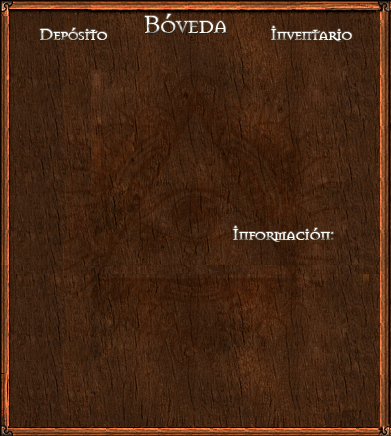
<style>
.page{position:relative;width:391px;height:436px}
.page>*{position:absolute;margin:0}
.t1{font:26.5px "Mason-Regular";letter-spacing:-0.06em}
.t2{font:18px "Mason-Regular";letter-spacing:-0.06em}
</style>
<div class="page">
<p class="t1" style="left:145px;top:14px;width:83px;height:19px">Bóveda</p>
<p class="t2" style="left:40px;top:28px;width:67px;height:12px">Depósito</p>
<p class="t2" style="left:271px;top:26px;width:81px;height:16px">Inventario</p>
<p class="t2" style="left:233px;top:226px;width:101px;height:16px">Información:</p>
</div>
